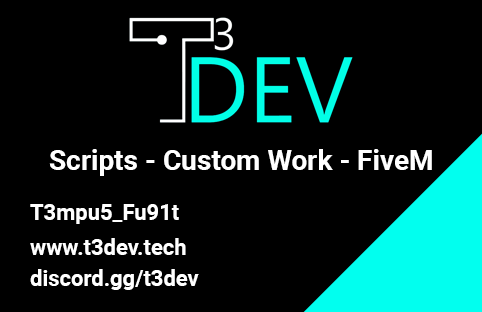
<style>
.page{position:relative;width:482px;height:312px;background:#000000}
.page>*{position:absolute;margin:0}
.t1{font:28px "Roboto-Bold";color:#ffffff}
.t2{font:22px "Roboto-Bold";color:#ffffff}
</style>
<div class="page">
<p class="t1" style="left:49px;top:149px;width:383px;height:27px">Scripts - Custom Work - FiveM</p>
<p class="t2" style="left:30px;top:204px;width:149px;height:20px">T3mpu5_Fu91t</p>
<p class="t2" style="left:30px;top:238px;width:156px;height:17px">www.t3dev.tech</p>
<p class="t2" style="left:30px;top:269px;width:169px;height:21px">discord.gg/t3dev</p>
</div>
